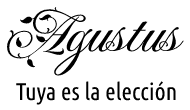
<style>
.page{position:relative;width:190px;height:110px;background:#ffffff}
.page>*{position:absolute;margin:0}
.t1{font:63px "FleurDeLeah-Regular";color:#000000}
.t2{font:24px "UbuntuCondensed-Regular";color:#000000}
</style>
<div class="page">
<p class="t1" style="left:7px;top:7px;width:177px;height:69px">Agustus</p>
<p class="t2" style="left:16px;top:81px;width:160px;height:24px">Tuya es la elección</p>
</div>
